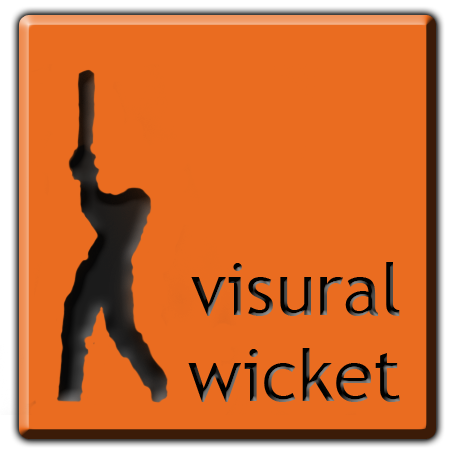
<style>
.page{position:relative;width:450px;height:450px;background:#ea6c20}
.page>*{position:absolute;margin:0}
.t1{font:72px "TrebuchetMS"}
</style>
<div class="page">
<p class="t1" style="left:188px;top:262px;width:212px;height:140px;text-align:right">visural<br>wicket</p>
</div>
